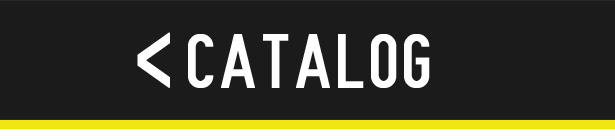
<style>
.page{position:relative;width:615px;height:140px;background:#1c1b1b}
.page>*{position:absolute;margin:0}
.t1{font:41.7px "Nue-Gothic";letter-spacing:0.05em;color:#ffffff;font-weight:bold;scale:2.85 1}
.t2{font:70.8px "Nue-Gothic";letter-spacing:0.05em;color:#ffffff;font-weight:bold}
</style>
<div class="page">
<p class="t1" style="left:137px;top:32px;width:33px;height:56px;rotate:90deg">v</p>
<p class="t2" style="left:188px;top:34px;width:242px;height:54px">CATALOG</p>
</div>
